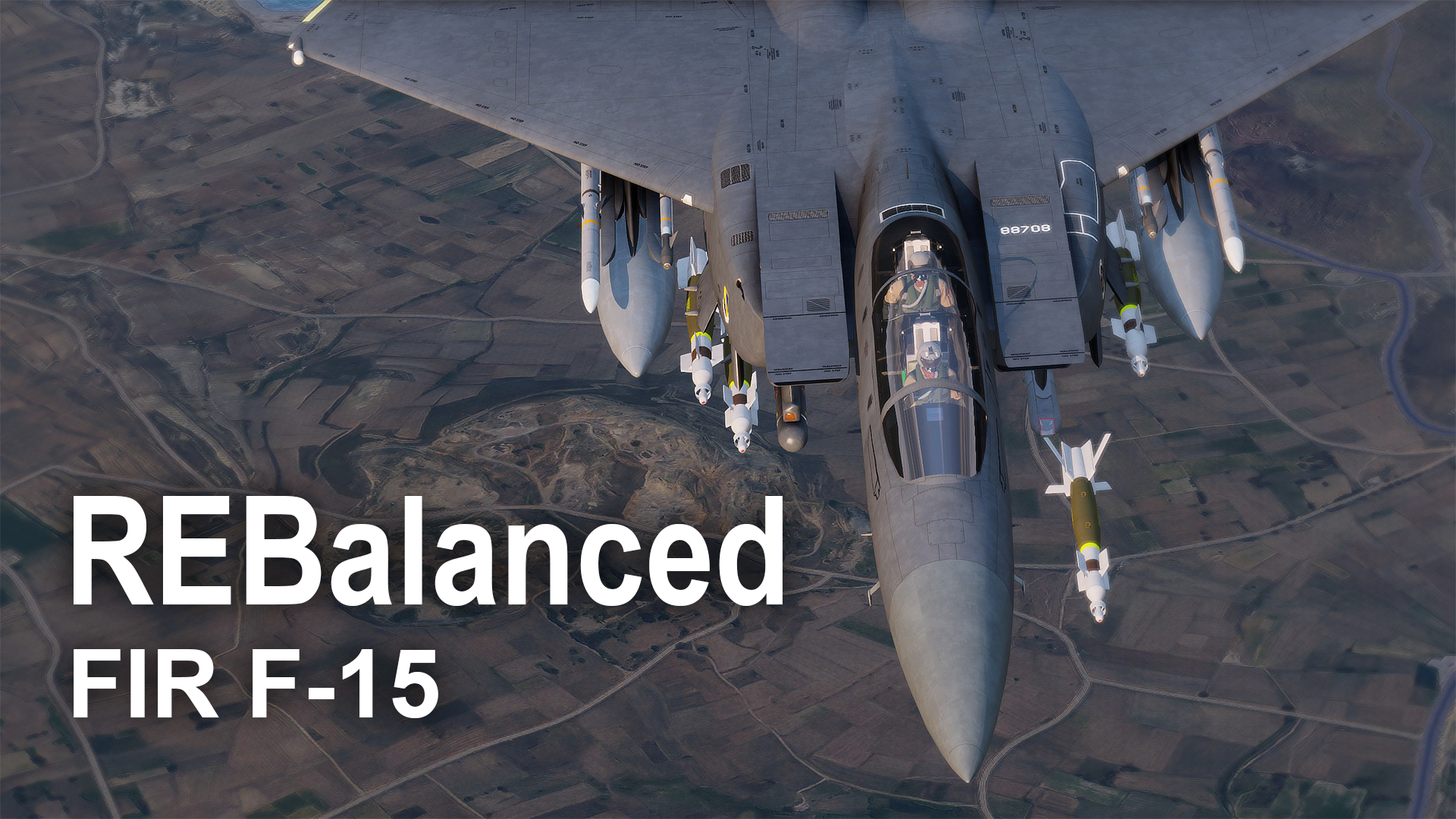
<style>
.page{position:relative;width:1456px;height:819px}
.page>*{position:absolute;margin:0}
.t1{font:151.7px "ArialNarrow-Bold";color:#ffffff}
.t2{font:94.8px "Arial-BoldMT";color:#ffffff}
</style>
<div class="page">
<p class="t1" style="left:74px;top:496px;width:709px;height:110px">REBalanced</p>
<p class="t2" style="left:74px;top:649px;width:364px;height:69px">FIR F-15</p>
</div>
